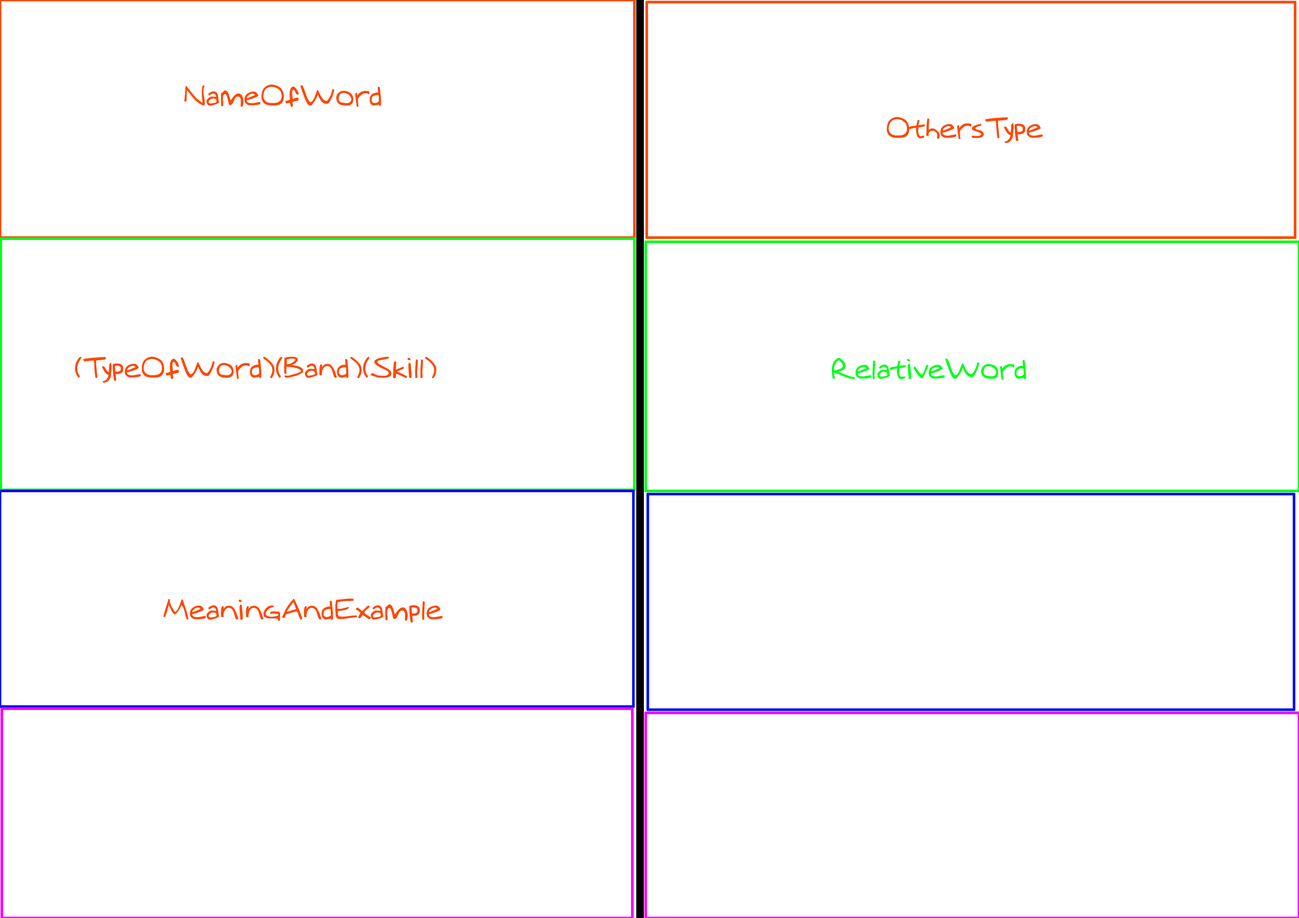
<style>
.page{position:relative;width:1299px;height:918px;background:#ffffff}
.page>*{position:absolute;margin:0}
.t1{font:27.3px "MTOaugie-Regular";color:#ff4900}
.t2{font:27.3px "MTOaugie-Regular";color:#00ff18}
</style>
<div class="page">
<p class="t1" style="left:184px;top:85px;width:197px;height:22px">NameOfWord</p>
<p class="t1" style="left:886px;top:117px;width:156px;height:26px">OthersType</p>
<p class="t1" style="left:75px;top:357px;width:361px;height:26px">(TypeOfWord)(Band)(Skill)</p>
<p class="t2" style="left:832px;top:358px;width:194px;height:22px">RelativeWord</p>
<p class="t1" style="left:163px;top:599px;width:279px;height:24px">MeaningAndExample</p>
</div>
